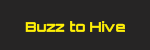
<style>
.page{position:relative;width:150px;height:50px;background:#262525}
.page>*{position:absolute;margin:0}
.t1{font:14px "Orbitron-Bold";color:#fff004}
</style>
<div class="page">
<p class="t1" style="left:25px;top:21px;width:100px;height:11px">Buzz to Hive</p>
</div>
